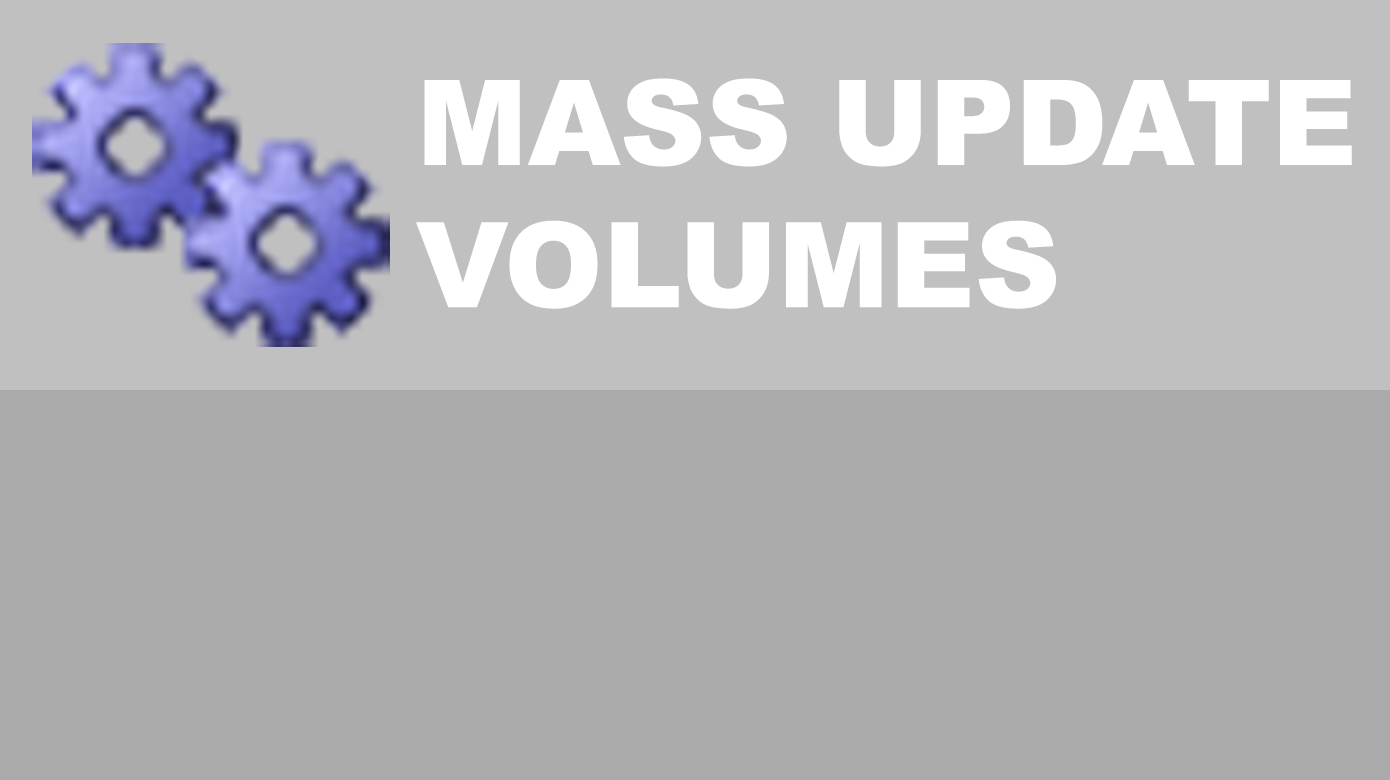
<style>
.page{position:relative;width:1390px;height:780px;background:#aaaaaa}
.page>*{position:absolute;margin:0}
.t1{font:118.5px "Arial-Black";color:#ffffff}
</style>
<div class="page">
<p class="t1" style="left:416px;top:78px;width:936px;height:231px">MASS UPDATE<br>VOLUMES</p>
</div>
